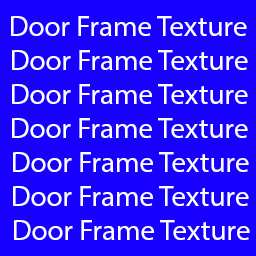
<style>
.page{position:relative;width:256px;height:256px;background:#1800ff}
.page>*{position:absolute;margin:0}
.t1{font:29.2px "MyriadPro-Regular";color:#ffffff}
</style>
<div class="page">
<p class="t1" style="left:11px;top:16px;width:236px;height:20px">Door Frame Texture</p>
<p class="t1" style="left:12px;top:50px;width:236px;height:20px">Door Frame Texture</p>
<p class="t1" style="left:12px;top:84px;width:236px;height:20px">Door Frame Texture</p>
<p class="t1" style="left:12px;top:118px;width:236px;height:20px">Door Frame Texture</p>
<p class="t1" style="left:13px;top:152px;width:236px;height:20px">Door Frame Texture</p>
<p class="t1" style="left:13px;top:186px;width:236px;height:20px">Door Frame Texture</p>
<p class="t1" style="left:14px;top:220px;width:236px;height:20px">Door Frame Texture</p>
</div>
